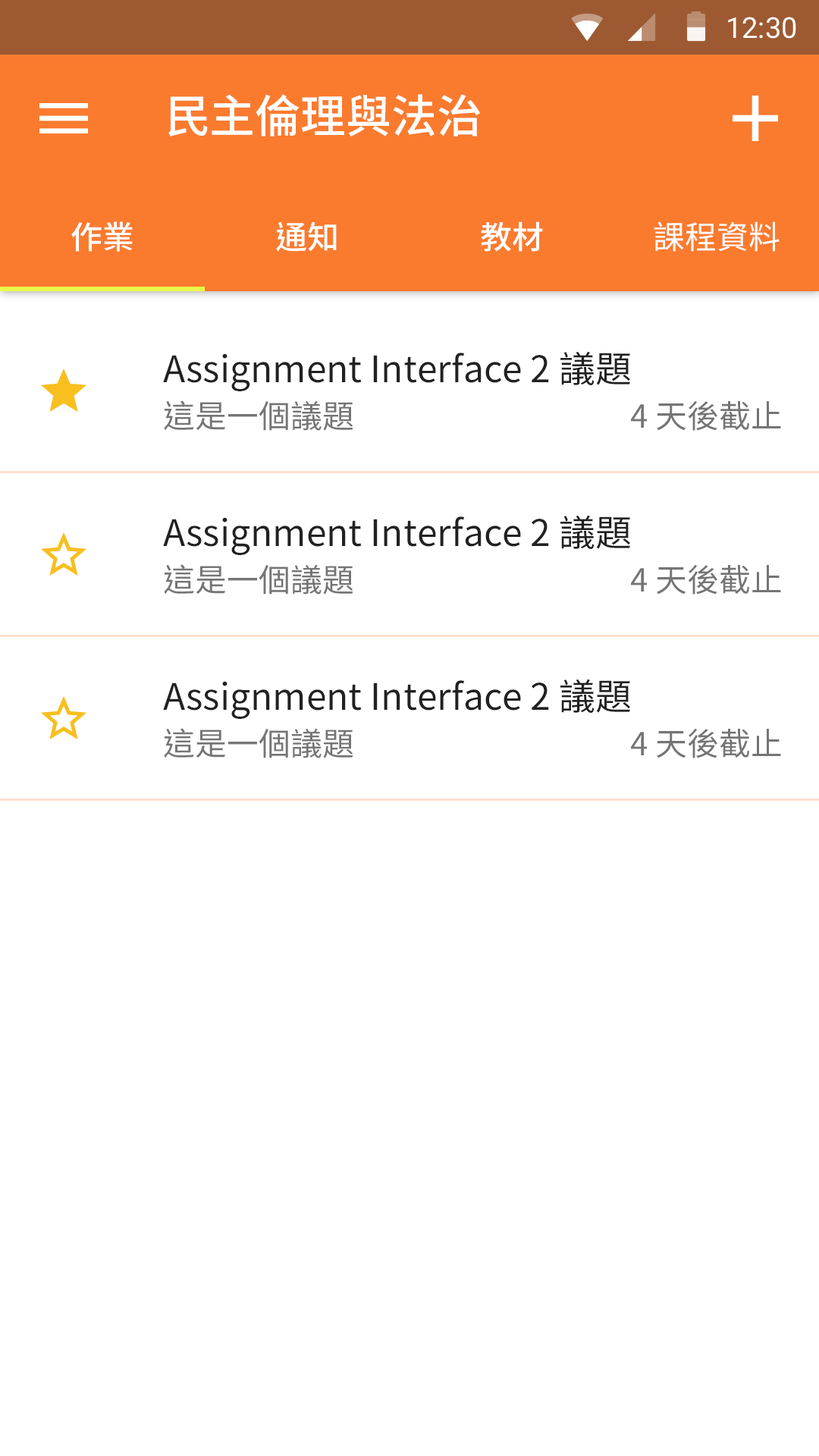
<style>
.page{position:relative;width:819px;height:1456px;background:#ffffff}
.page>*{position:absolute;margin:0}
.t1{font:28.9px "Roboto-Regular";color:#ffffff}
.t2{font:45.5px "SourceHanSansTWHK-Medium";color:#ffffff}
.t3{font:31.8px "SourceHanSansTWHK-Medium";color:#ffffff}
.t4{font:31.8px "SourceHanSansTWHK-Regular";color:#ffffff}
.t5{font:36.4px "SourceHanSansTWHK-Regular";color:#212121}
.t6{font:31.8px "SourceHanSansTWHK-Regular";color:#757575}
</style>
<div class="page">
<p class="t1" style="left:728px;top:17px;width:68px;height:22px">12:30</p>
<p class="t2" style="left:168px;top:94px;width:312px;height:42px">民主倫理與法治</p>
<p class="t3" style="left:71px;top:221px;width:62px;height:31px">作業</p>
<p class="t3" style="left:276px;top:221px;width:61px;height:31px">通知</p>
<p class="t3" style="left:481px;top:221px;width:62px;height:31px">教材</p>
<p class="t4" style="left:654px;top:221px;width:126px;height:31px">課程資料</p>
<p class="t5" style="left:163px;top:351px;width:468px;height:40px">Assignment Interface 2 議題</p>
<p class="t6" style="left:164px;top:400px;width:189px;height:31px">這是一個議題</p>
<p class="t6" style="left:631px;top:401px;width:150px;height:30px">4 天後截止</p>
<p class="t5" style="left:163px;top:515px;width:468px;height:40px">Assignment Interface 2 議題</p>
<p class="t6" style="left:164px;top:564px;width:189px;height:31px">這是一個議題</p>
<p class="t6" style="left:631px;top:565px;width:150px;height:30px">4 天後截止</p>
<p class="t5" style="left:163px;top:679px;width:468px;height:40px">Assignment Interface 2 議題</p>
<p class="t6" style="left:164px;top:728px;width:189px;height:30px">這是一個議題</p>
<p class="t6" style="left:631px;top:729px;width:150px;height:29px">4 天後截止</p>
</div>
